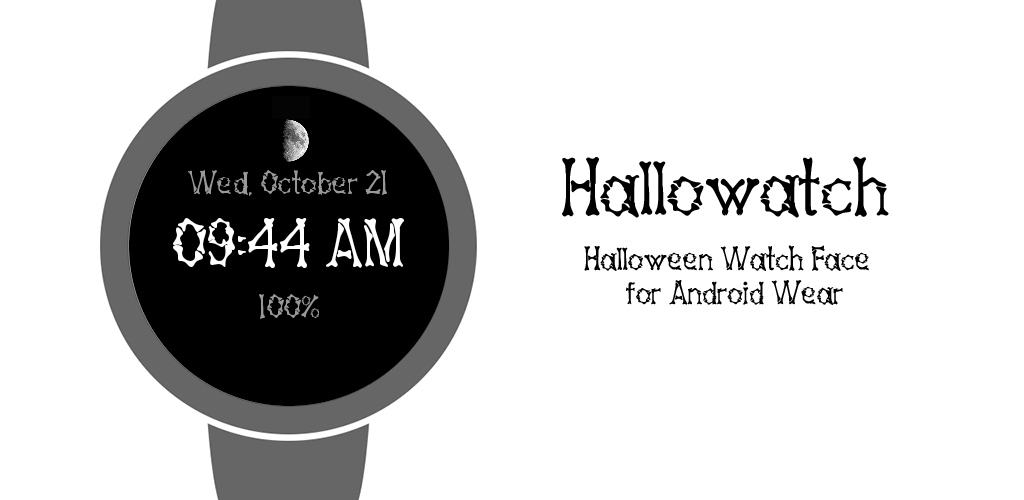
<style>
.page{position:relative;width:1024px;height:500px;background:#ffffff}
.page>*{position:absolute;margin:0}
.t1{font:72px "Bones-Regular";color:#000000}
.t2{font:30px "Bones-Regular";color:#000000}
</style>
<div class="page">
<p class="t1" style="left:562px;top:156px;width:327px;height:62px">Hallowatch</p>
<p class="t2" style="left:584px;top:245px;width:285px;height:26px">Halloween Watch Face</p>
<p class="t2" style="left:626px;top:280px;width:217px;height:25px">for Android Wear</p>
</div>
